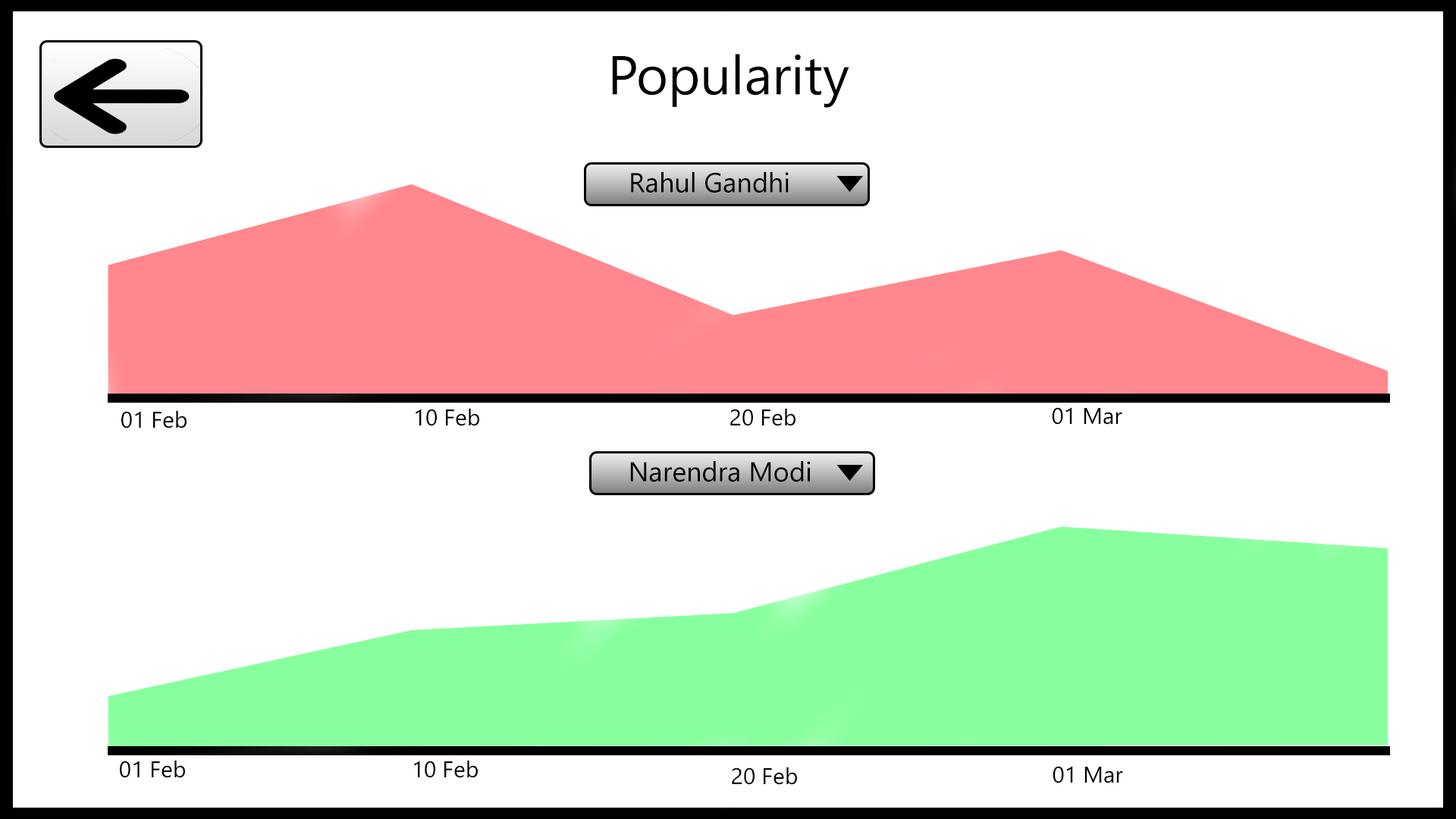
<style>
.page{position:relative;width:1456px;height:819px;background:#ffffff}
.page>*{position:absolute;margin:0}
.t1{font:54.6px "SegoeUI";color:#000000}
.t2{font:27.3px "SegoeUI";color:#000000}
.t3{font:22.7px "SegoeUI";color:#000000}
</style>
<div class="page">
<p class="t1" style="left:612px;top:54px;width:237px;height:54px">Popularity</p>
<p class="t2" style="left:631px;top:171px;width:158px;height:22px">Rahul Gandhi</p>
<p class="t3" style="left:121px;top:410px;width:66px;height:18px">01 Feb</p>
<p class="t3" style="left:416px;top:408px;width:63px;height:18px">10 Feb</p>
<p class="t3" style="left:730px;top:408px;width:65px;height:18px">20 Feb</p>
<p class="t3" style="left:1052px;top:407px;width:70px;height:18px">01 Mar</p>
<p class="t2" style="left:630px;top:461px;width:181px;height:21px">Narendra Modi</p>
<p class="t3" style="left:120px;top:760px;width:65px;height:18px">01 Feb</p>
<p class="t3" style="left:414px;top:760px;width:64px;height:18px">10 Feb</p>
<p class="t3" style="left:732px;top:767px;width:65px;height:18px">20 Feb</p>
<p class="t3" style="left:1053px;top:766px;width:70px;height:17px">01 Mar</p>
</div>
